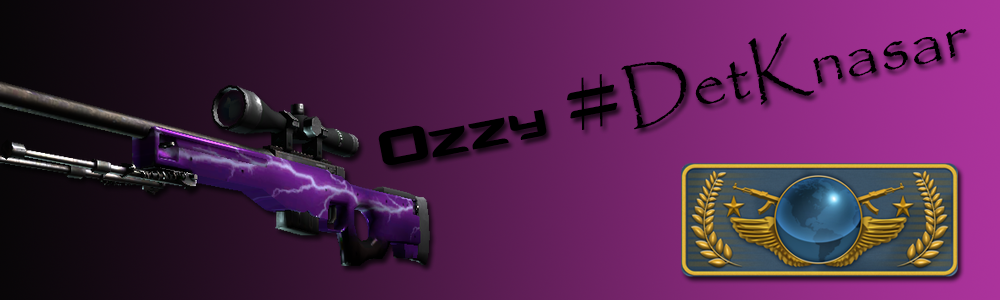
<style>
.page{position:relative;width:1000px;height:300px}
.page>*{position:absolute;margin:0}
.t1{font:68.8px "Papyrus-Regular";color:#000000}
.t2{font:68.8px "Counter-StrikeRegular";color:#000000}
.t3{font:68.8px "GoudyStout";color:#000000}
</style>
<div class="page">
<p class="t1" style="left:378px;top:29px;width:589px;height:136px;rotate:-11deg"><span class="t2">Ozzy </span><span class="t3">#</span>DetKnasar</p>
</div>
